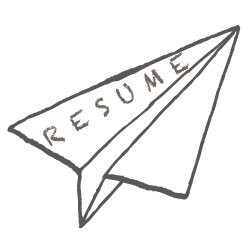
<style>
.page{position:relative;width:250px;height:250px;background:#ffffff}
.page>*{position:absolute;margin:0}
.t1{font:24px "Chalkduster";color:#70665d}
</style>
<div class="page">
<p class="t1" style="left:43px;top:52px;width:146px;height:95px;rotate:-30deg">R E S U M E</p>
</div>
